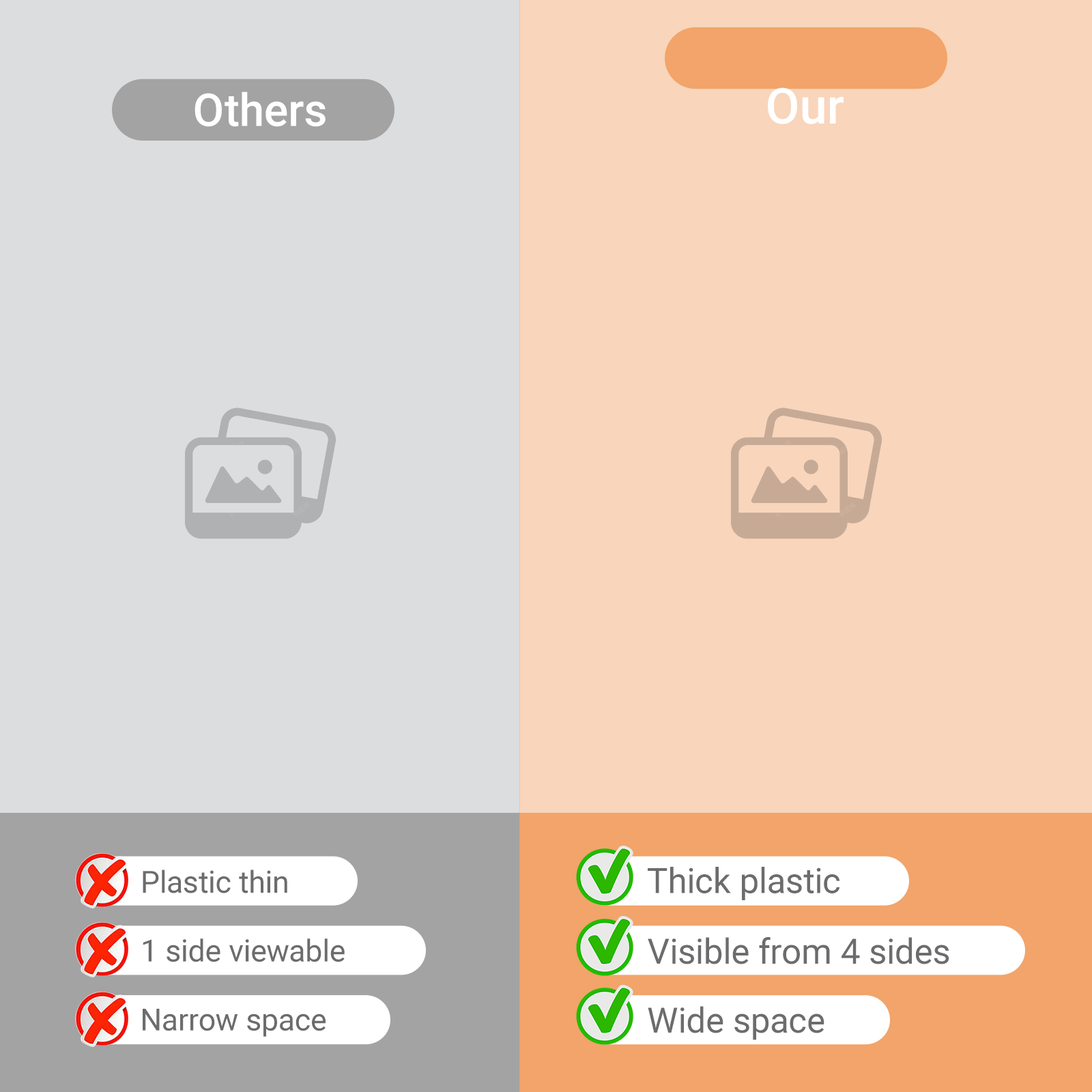
<style>
.page{position:relative;width:1092px;height:1092px;background:#f8d5bb}
.page>*{position:absolute;margin:0}
.t1{font:49.5px "Roboto-Medium";color:#ffffff}
.t2{font:45.1px "Roboto-Medium";color:#ffffff}
.t3{font:30.6px "Roboto-Regular";color:#6c6c6c}
.t4{font:34.9px "Roboto-Regular";color:#6c6c6c}
</style>
<div class="page">
<p class="t1" style="left:768px;top:87px;width:76px;height:37px">Our</p>
<p class="t2" style="left:195px;top:91px;width:131px;height:36px">Others</p>
<p class="t3" style="left:143px;top:869px;width:144px;height:24px">Plastic thin</p>
<p class="t4" style="left:648px;top:867px;width:191px;height:33px">Thick plastic</p>
<p class="t3" style="left:143px;top:938px;width:202px;height:24px">1 side viewable</p>
<p class="t4" style="left:648px;top:937px;width:301px;height:27px">Visible from 4 sides</p>
<p class="t3" style="left:143px;top:1009px;width:183px;height:28px">Narrow space</p>
<p class="t4" style="left:648px;top:1006px;width:176px;height:34px">Wide space</p>
</div>
